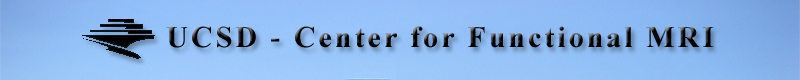
<style>
.page{position:relative;width:800px;height:80px}
.page>*{position:absolute;margin:0}
.t1{font:30px "TimesNewRomanPS-BoldMT";letter-spacing:0.1em;color:#000000}
</style>
<div class="page">
<p class="t1" style="left:166px;top:26px;width:548px;height:22px">UCSD - Center for Functional MRI</p>
</div>
